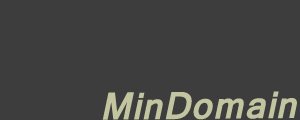
<style>
.page{position:relative;width:300px;height:120px;background:#3d3d3d}
.page>*{position:absolute;margin:0}
.t1{font:37.5px "Kartika-Bold";color:#c2c59f;scale:0.96 1}
</style>
<div class="page">
<p class="t1" style="left:102px;top:91px;width:195px;height:29px;rotate:-1deg">MinDomain</p>
</div>
